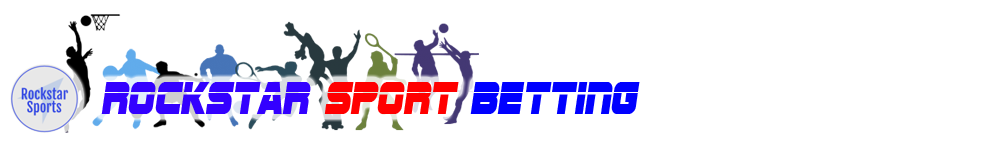
<style>
.page{position:relative;width:1000px;height:160px;background:#ffffff}
.page>*{position:absolute;margin:0}
.t1{font:48px "SFSportsNight";color:#3300ff;scale:0.82 1}
.t2{font:48px "SFSportsNight";color:#ff0000;scale:0.82 1}
.t3{font:48px "SFSportsNight";color:#0000ff;scale:0.82 1}
</style>
<div class="page">
<p class="t1" style="left:101px;top:82px;width:539px;height:32px">RockStar<span class="t2"> Sport </span><span class="t3">Betting</span></p>
</div>
